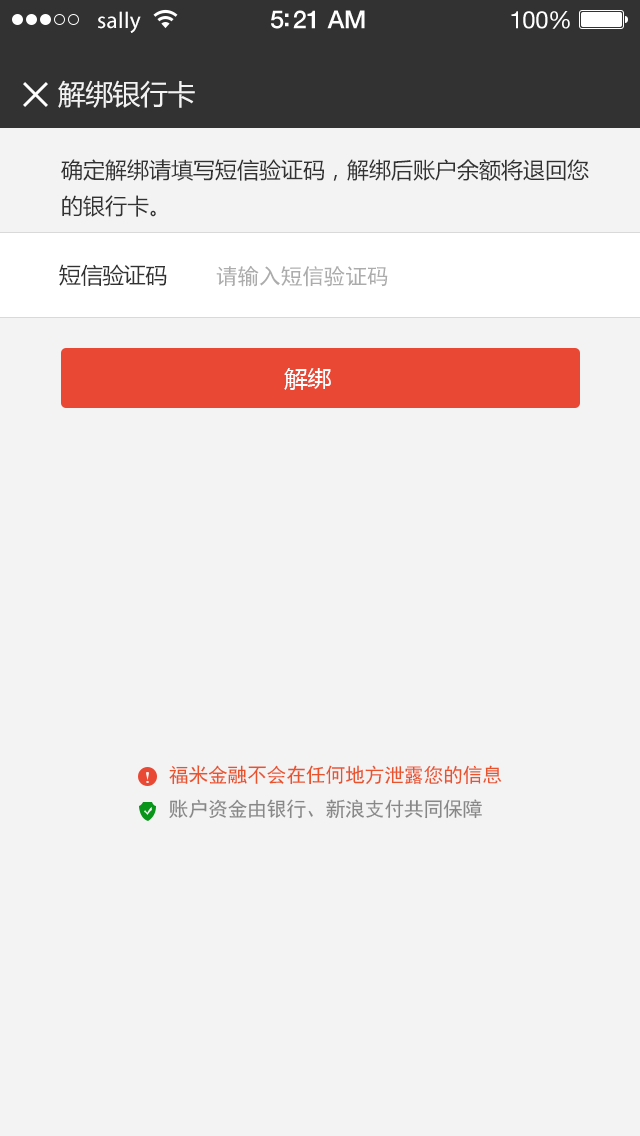
<style>
.page{position:relative;width:640px;height:1136px;background:#f3f3f3}
.page>*{position:absolute;margin:0}
.t1{font:23px "MyriadPro-Regular";letter-spacing:0.02em;color:#ffffff}
.t2{font:25px "HelveticaNeue-Medium";letter-spacing:-0.02em;color:#ffffff}
.t3{font:24px "HelveticaNeue";letter-spacing:-0.02em;color:#ffffff}
.t4{font:28px "MicrosoftYaHei";letter-spacing:-0.02em;color:#f3f3f3}
.t5{font:22px/36px "MicrosoftYaHei";color:#323232}
.t6{font:22px "MicrosoftYaHei";letter-spacing:-0.02em;color:#323232}
.t7{font:22px "SimHei";letter-spacing:-0.02em;color:#acacac}
.t8{font:24px "MicrosoftYaHei";letter-spacing:-0.02em;color:#ffffff}
.t9{font:20px "SimHei";letter-spacing:-0.02em;color:#ea522b}
.t10{font:20px "SimHei";letter-spacing:-0.02em;color:#878787}
</style>
<div class="page">
<p class="t1" style="left:98px;top:11px;width:43px;height:22px">sally</p>
<p class="t2" style="left:271px;top:10px;width:94px;height:19px">5:21 AM</p>
<p class="t3" style="left:511px;top:11px;width:59px;height:18px">100%</p>
<p class="t4" style="left:58px;top:80px;width:137px;height:28px">解绑银行卡</p>
<p class="t5" style="left:61px;top:159px;width:528px;height:58px">确定解绑请填写短信验证码，解绑后账户余额将退回您的银行卡。</p>
<p class="t6" style="left:59px;top:264px;width:108px;height:22px">短信验证码</p>
<p class="t7" style="left:216px;top:265px;width:172px;height:22px">请输入短信验证码</p>
<p class="t8" style="left:284px;top:368px;width:47px;height:22px">解绑</p>
<p class="t9" style="left:169px;top:765px;width:333px;height:20px">福米金融不会在任何地方泄露您的信息</p>
<p class="t10" style="left:169px;top:799px;width:313px;height:20px">账户资金由银行、新浪支付共同保障</p>
</div>
